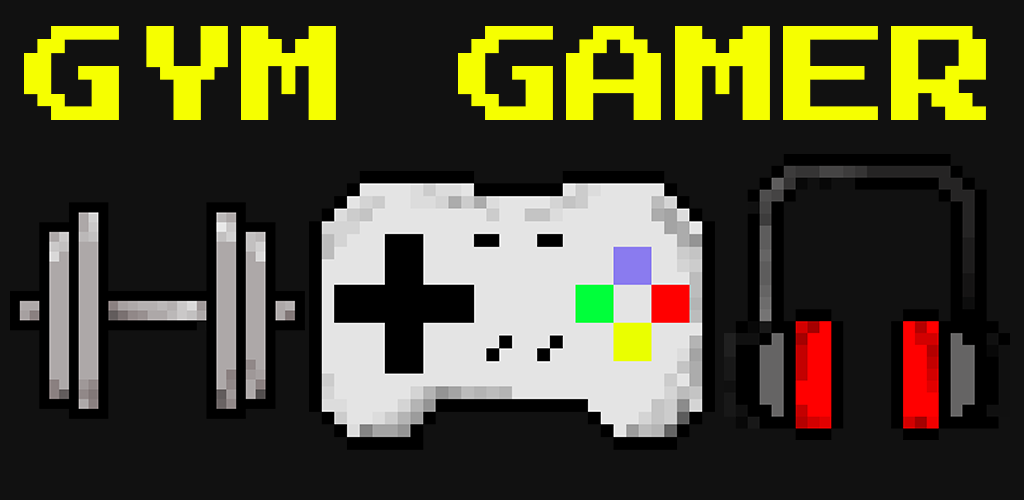
<style>
.page{position:relative;width:1024px;height:500px;background:#111111}
.page>*{position:absolute;margin:0}
.t1{font:108.4px "PressStart2P-Regular";color:#f6ff00}
</style>
<div class="page">
<p class="t1" style="left:24px;top:26px;width:962px;height:94px">GYM GAMER</p>
</div>
